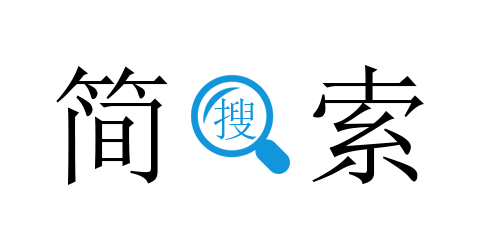
<style>
.page{position:relative;width:480px;height:240px;background:#ffffff}
.page>*{position:absolute;margin:0}
.t1{font:128px "SimSun";color:#000000}
.t2{font:46px "SimSun";color:#1296db}
</style>
<div class="page">
<p class="t1" style="left:56px;top:65px;width:368px;height:120px">简  索</p>
<p class="t2" style="left:213px;top:98px;width:44px;height:42px">搜</p>
</div>
